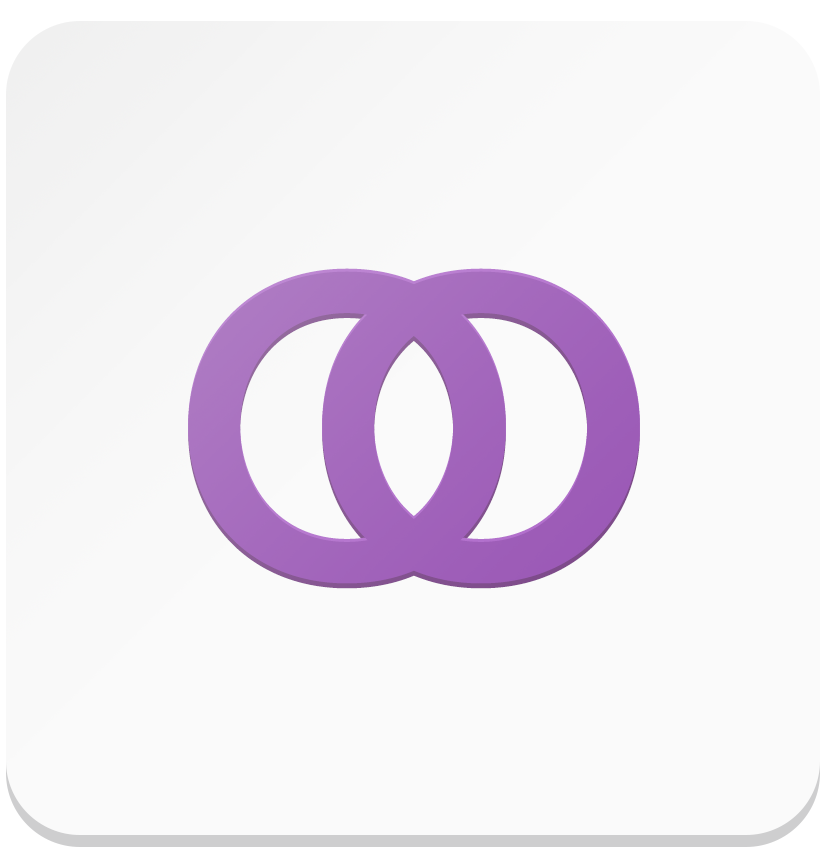
<style>
.page{position:relative;width:826px;height:853px;background:#fafafa}
.page>*{position:absolute;margin:0}
.t1{font:615.1px "ProximaNova-Regular";letter-spacing:-0.37em;color:#b06ccb;scale:1.08 1}
.t2{font:615.1px "ProximaNova-Regular";letter-spacing:-0.37em;color:#a367bc;scale:1.08 1}
.t3{font:615.1px "ProximaNova-Regular";letter-spacing:-0.37em;color:#9b59b6;scale:1.08 1}
</style>
<div class="page">
<p class="t1" style="left:188px;top:268px;width:452px;height:313px">oo</p>
<p class="t2" style="left:188px;top:276px;width:452px;height:313px">oo</p>
<p class="t3" style="left:188px;top:271px;width:452px;height:313px">oo</p>
</div>
